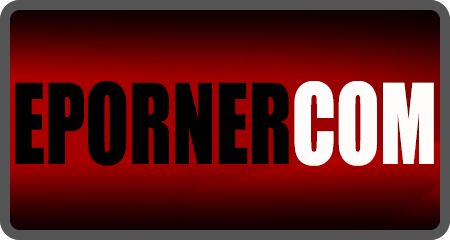
<style>
.page{position:relative;width:450px;height:240px}
.page>*{position:absolute;margin:0}
.t1{font:102.8px "Impact";color:#000000;scale:0.78 1}
.t2{font:102.8px "Impact";color:#fffcfc;scale:0.78 1}
</style>
<div class="page">
<p class="t1" style="left:15px;top:81px;width:419px;height:85px">EPORNER<span class="t2">COM</span></p>
</div>
